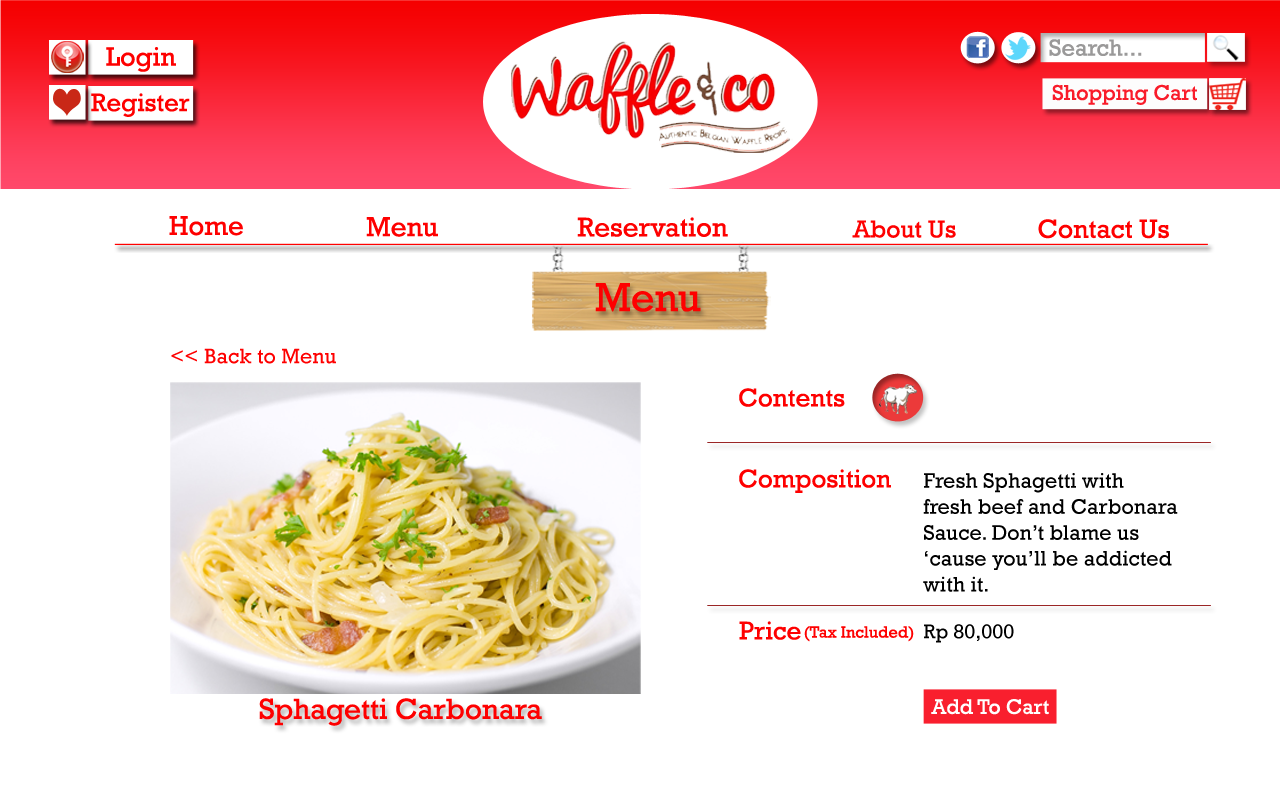
<style>
.page{position:relative;width:1280px;height:800px;background:#ffffff}
.page>*{position:absolute;margin:0}
.t1{font:27.5px "Rockwell";color:#fe0000}
.t2{font:28px "Rockwell";color:#fe0000}
.t3{font:27.6px "Rockwell";color:#fe0000}
.t4{font:24.9px "Rockwell";color:#fe0000}
.t5{font:26.7px "Rockwell";color:#fe0000}
.t6{font:41.1px "Rockwell";color:#fe0000}
.t7{font:21.5px "Rockwell";color:#fe0000}
.t8{font:26px "Rockwell";color:#fe0000}
.t9{font:21.6px "Rockwell";color:#000000}
.t10{font:16.5px "Rockwell";color:#fe0000}
.t11{font:20.3px "Rockwell";color:#000000}
.t12{font:29.7px "Rockwell";color:#fe0000}
.t13{font:21.3px "Rockwell";color:#ffffff}
</style>
<div class="page">
<p class="t1" style="left:169px;top:216px;width:74px;height:20px">Home</p>
<p class="t2" style="left:366px;top:217px;width:72px;height:20px">Menu</p>
<p class="t3" style="left:577px;top:217px;width:151px;height:20px">Reservation</p>
<p class="t4" style="left:852px;top:220px;width:104px;height:18px">About Us</p>
<p class="t5" style="left:1038px;top:219px;width:131px;height:20px">Contact Us</p>
<p class="t6" style="left:595px;top:283px;width:106px;height:29px">Menu</p>
<p class="t7" style="left:171px;top:348px;width:165px;height:16px">&lt;&lt; Back to Menu</p>
<p class="t8" style="left:739px;top:388px;width:106px;height:19px">Contents</p>
<p class="t8" style="left:739px;top:469px;width:152px;height:24px">Composition</p>
<p class="t9" style="left:923px;top:473px;width:255px;height:119px">Fresh Sphagetti with<br>fresh beef and Carbonara<br>Sauce. Don’t blame us <br>‘cause you’ll be addicted<br>with it.</p>
<p class="t8" style="left:739px;top:621px;width:62px;height:19px">Price</p>
<p class="t10" style="left:804px;top:626px;width:110px;height:16px">(Tax Included)</p>
<p class="t11" style="left:924px;top:624px;width:90px;height:19px">Rp 80,000</p>
<p class="t12" style="left:259px;top:698px;width:283px;height:28px">Sphagetti Carbonara</p>
<p class="t13" style="left:931px;top:699px;width:118px;height:16px">Add To Cart</p>
</div>
